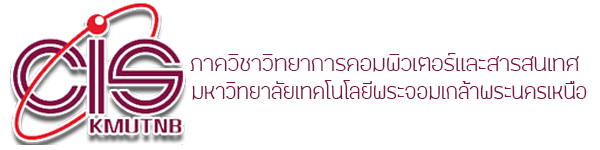
<style>
.page{position:relative;width:600px;height:150px;background:#ffffff}
.page>*{position:absolute;margin:0}
.t1{font:31.5px "FCLamoonLight";color:#7e1245}
.t2{font:30.6px "FCLamoonLight";color:#7e1245;scale:0.96 1}
</style>
<div class="page">
<p class="t1" style="left:190px;top:53px;width:389px;height:19px">ภาควิชาวิทยาการคอมพิวเตอร์และสารสนเทศ</p>
<p class="t2" style="left:192px;top:80px;width:395px;height:20px">มหาวิทยาลัยเทคโนโลยีพระจอมเกล้าพระนครเหนือ</p>
</div>
